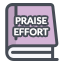
<style>
.page{position:relative;width:64px;height:64px;background:#ffffff}
.page>*{position:absolute;margin:0}
.t1{font:9.3px "Lato-Bold";color:#ffffff}
</style>
<div class="page">
<p class="t1" style="left:14px;top:17px;width:35px;height:19px;text-align:center">PRAISE<br>EFFORT</p>
</div>
